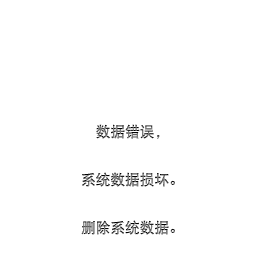
<style>
.page{position:relative;width:256px;height:256px;background:#ffffff}
.page>*{position:absolute;margin:0}
.t1{font:14.7px/24px "DFPHeiW5-GB"}
</style>
<div class="page">
<p class="t1" style="left:81px;top:124px;width:94px;height:111px;text-align:center">数据错误，<br><br>系统数据损坏。<br><br>删除系统数据。</p>
</div>
